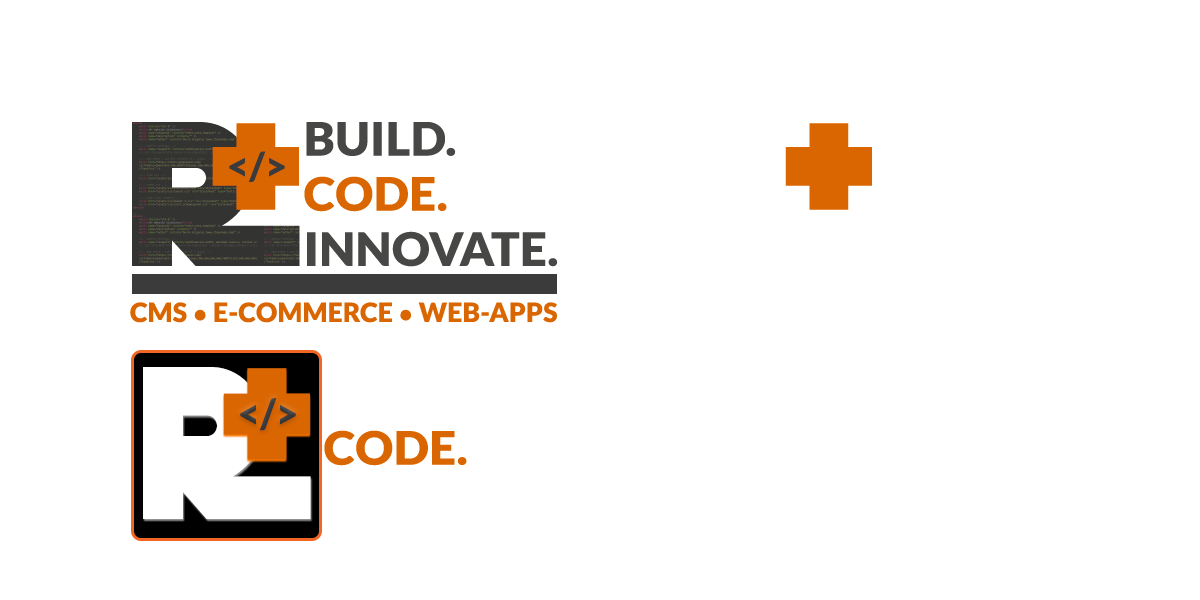
<style>
.page{position:relative;width:1200px;height:600px;background:#ffffff}
.page>*{position:absolute;margin:0}
.t1{font:203.2px "DeathStar";letter-spacing:0.01em;color:#474746}
.t2{font:195.9px "DeathStar";letter-spacing:0.01em;color:#da6601}
.t3{font:45.9px "Lato-Black";letter-spacing:0.01em;color:#474746;scale:1.03 1}
.t4{font:45.9px "Lato-Black";letter-spacing:0.01em;color:#da6601;scale:1.03 1}
.t5{font:38px "Lato-Black";letter-spacing:0.01em;color:#3b3b3b}
.t6{font:26.5px "Lato-Black";letter-spacing:0.01em;color:#da6601}
.t7{font:24.4px "TimesNewRomanPSMT";letter-spacing:0.01em;color:#da6601}
.t8{font:214.5px "DeathStar";letter-spacing:0.01em;color:#ffffff;scale:0.95 1}
.t9{font:206.8px "DeathStar";letter-spacing:0.01em;color:#da6601;scale:0.95 1}
.t10{font:45.9px "Lato-Black";letter-spacing:0.01em;color:#ffffff;scale:1.03 1}
.t11{font:40.1px "Lato-Black";letter-spacing:0.01em;color:#3b3b3b;scale:0.95 1}
</style>
<div class="page">
<p class="t1" style="left:132px;top:122px;width:168px;height:144px">R</p>
<p class="t2" style="left:212px;top:123px;width:87px;height:87px">+</p>
<p class="t3" style="left:304px;top:122px;width:254px;height:145px">BUILD.<br><span class="t4">CODE.<br></span>INNOVATE.</p>
<p class="t2" style="left:785px;top:123px;width:87px;height:87px">+</p>
<p class="t5" style="left:229px;top:151px;width:56px;height:31px">&lt;/&gt;</p>
<p class="t6" style="left:130px;top:302px;width:427px;height:21px">CMS <span class="t7">●</span> E-COMMERCE <span class="t7">●</span> WEB-APPS</p>
<p class="t8" style="left:143px;top:367px;width:168px;height:152px">R</p>
<p class="t9" style="left:223px;top:368px;width:87px;height:92px">+</p>
<p class="t10" style="left:324px;top:376px;width:254px;height:145px">BUILD.<br><span class="t4">CODE.<br></span>INNOVATE.</p>
<p class="t11" style="left:240px;top:398px;width:56px;height:33px">&lt;/&gt;</p>
</div>
